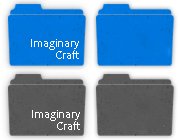
<style>
.page{position:relative;width:180px;height:140px}
.page>*{position:absolute;margin:0}
.t1{font:12px "SourceSansPro-Regular";color:#ffffff}
</style>
<div class="page">
<p class="t1" style="left:31px;top:39px;width:48px;height:11px">Imaginary</p>
<p class="t1" style="left:56px;top:50px;width:23px;height:9px">Craft</p>
<p class="t1" style="left:32px;top:110px;width:48px;height:11px">Imaginary</p>
<p class="t1" style="left:57px;top:121px;width:23px;height:9px">Craft</p>
</div>
